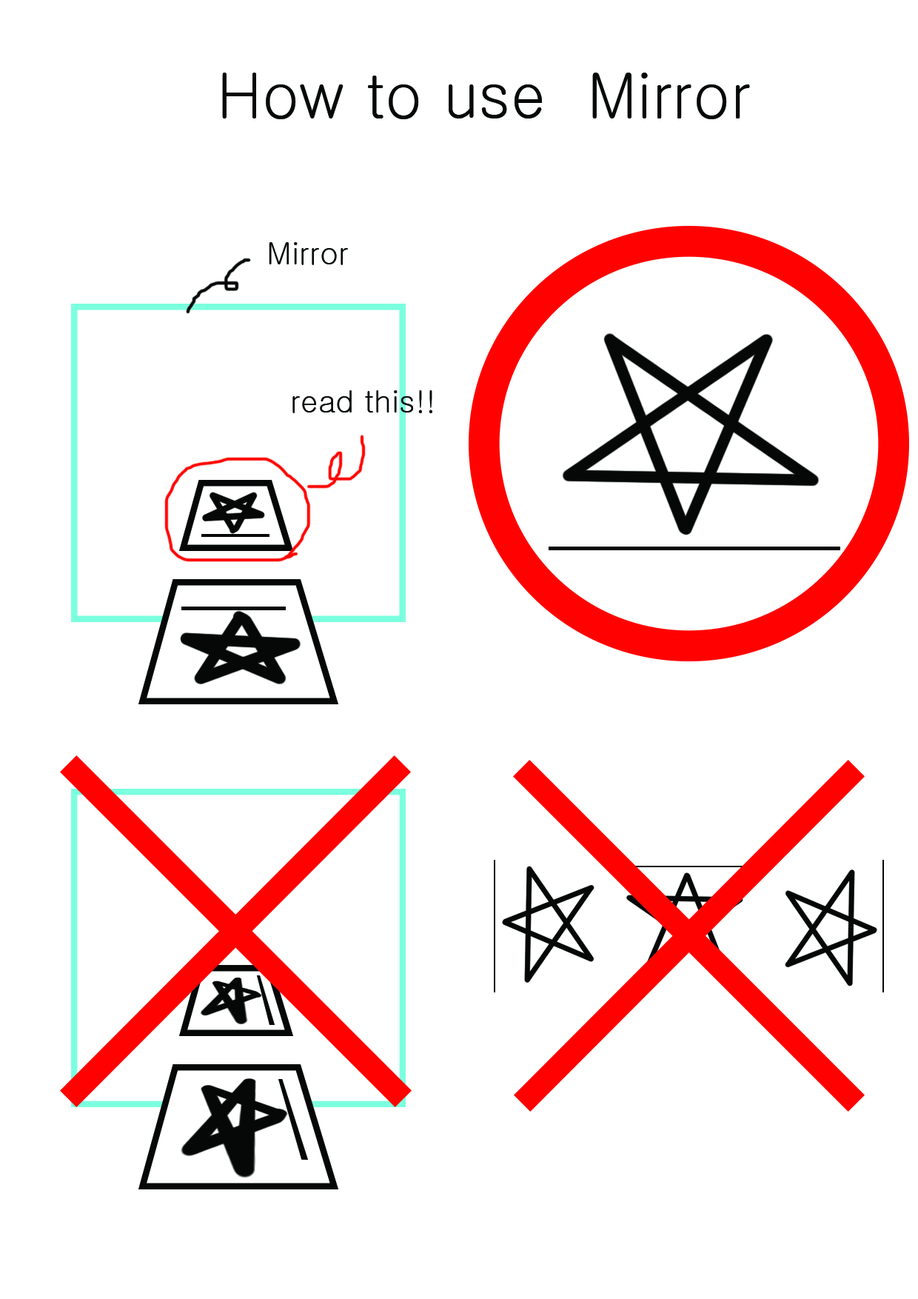
<style>
.page{position:relative;width:918px;height:1299px;background:#ffffff}
.page>*{position:absolute;margin:0}
.t1{font:61.7px "Gulim";color:#060808}
.t2{font:30.9px "Gulim";color:#060808}
</style>
<div class="page">
<p class="t1" style="left:222px;top:73px;width:528px;height:46px">How to use  Mirror</p>
<p class="t2" style="left:269px;top:242px;width:79px;height:23px">Mirror</p>
<p class="t2" style="left:292px;top:390px;width:140px;height:23px">read this!!</p>
</div>
